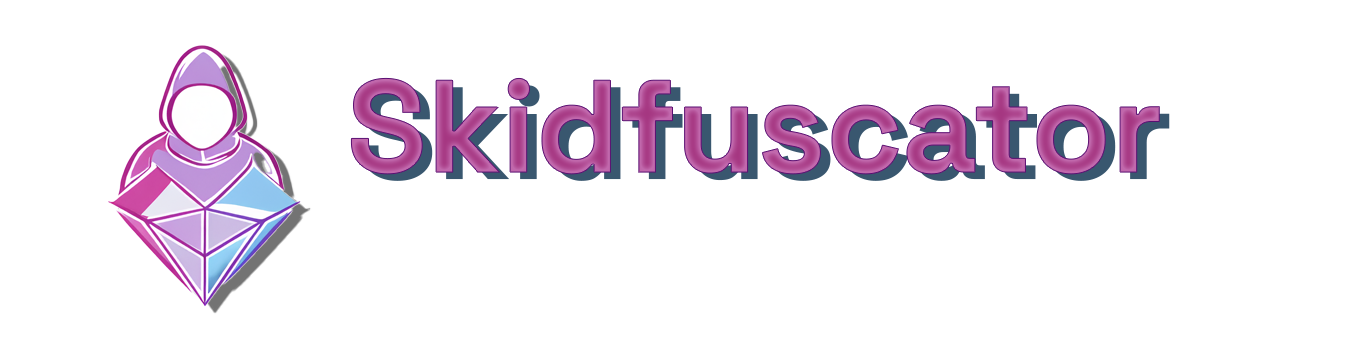
<style>
.page{position:relative;width:1366px;height:350px;background:#ffffff}
.page>*{position:absolute;margin:0}
.t1{font:131px "SpaceGrotesk-Bold";color:#b35097}
</style>
<div class="page">
<p class="t1" style="left:351px;top:78px;width:809px;height:96px">Skidfuscator</p>
</div>
